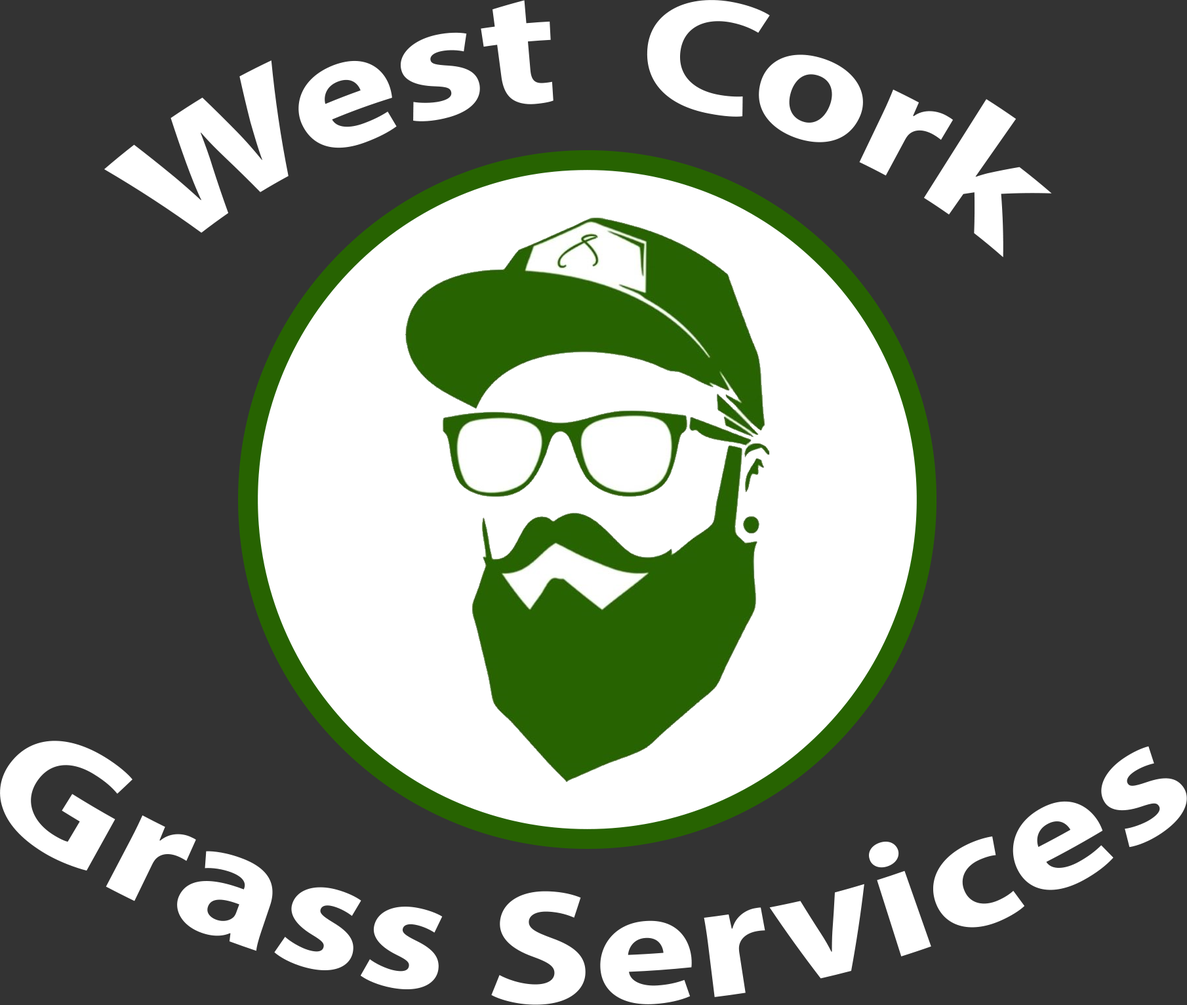
<style>
.page{position:relative;width:1187px;height:1005px;background:#333333}
.page>*{position:absolute;margin:0}
.t1{font:163.9px "MyriadPro-Bold";color:#ffffff}
</style>
<div class="page">
<p class="t1" style="left:104px;top:0px;width:948px;height:257px">West  Cork</p>
<p class="t1" style="left:0px;top:740px;width:1187px;height:265px">Grass Services</p>
</div>
